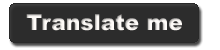
<style>
.page{position:relative;width:220px;height:50px;background:#2c2c2c}
.page>*{position:absolute;margin:0}
.t1{font:22px "Arial-Black";color:#fffcf9}
</style>
<div class="page">
<p class="t1" style="left:26px;top:14px;width:156px;height:17px">Translate me</p>
</div>
